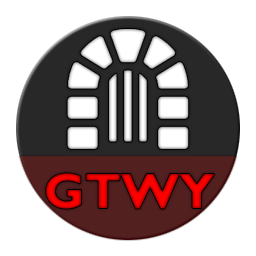
<style>
.page{position:relative;width:256px;height:256px;background:#ffffff}
.page>*{position:absolute;margin:0}
.t1{font:50px "GillSansMT-Bold";color:#ed0000}
</style>
<div class="page">
<p class="t1" style="left:46px;top:173px;width:169px;height:36px">GTWY</p>
</div>
